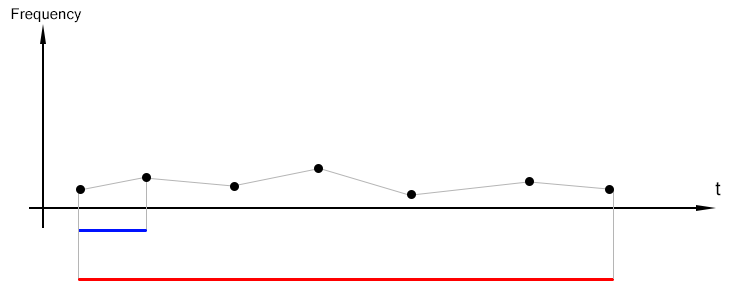
<style>
.page{position:relative;width:733px;height:289px;background:#ffffff}
.page>*{position:absolute;margin:0}
.t1{font:15px "MicrosoftSansSerif";color:#000000}
.t2{font:20px "MicrosoftSansSerif";color:#000000}
</style>
<div class="page">
<p class="t1" style="left:11px;top:8px;width:71px;height:15px">Frequency</p>
<p class="t2" style="left:715px;top:182px;width:6px;height:14px">t</p>
</div>
